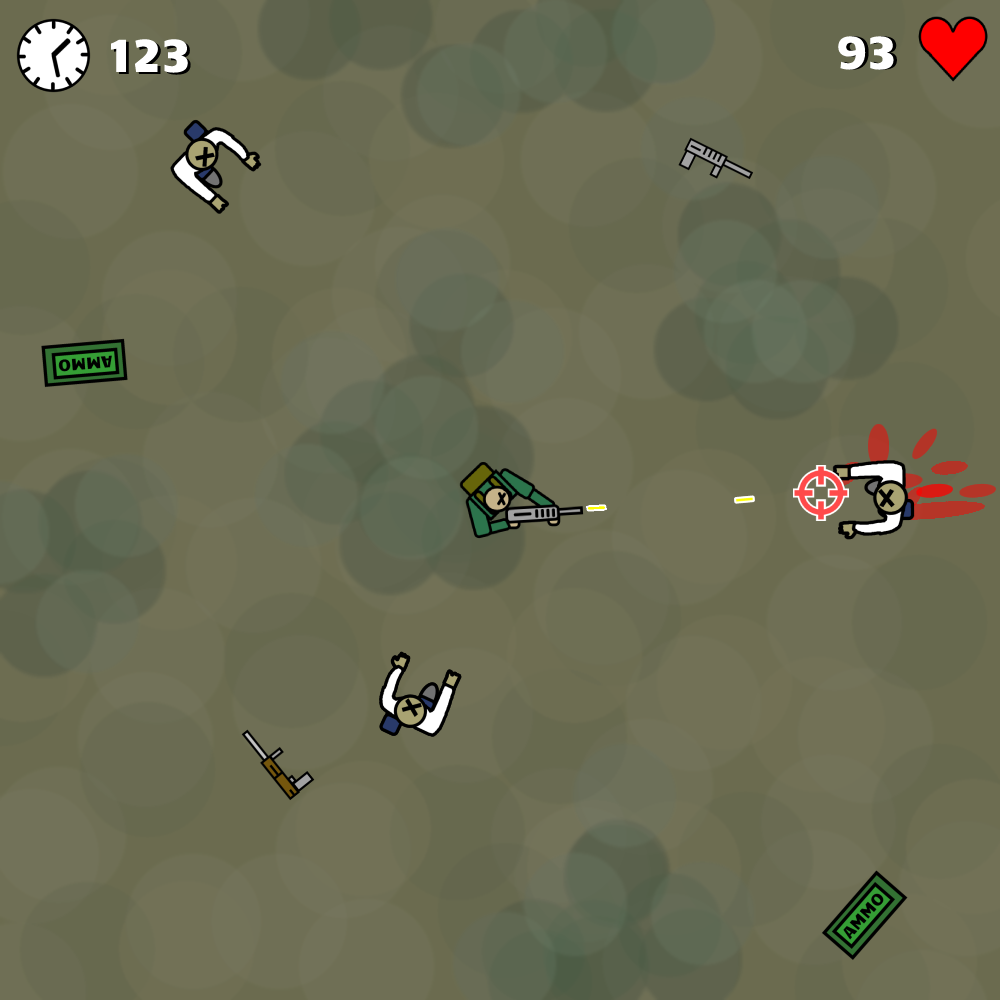
<style>
.page{position:relative;width:1000px;height:1000px}
.page>*{position:absolute;margin:0}
.t1{font:46.6px "Candal";color:#ffffff}
.t2{font:46.5px "Candal";color:#ffffff}
</style>
<div class="page">
<p class="t1" style="left:111px;top:39px;width:77px;height:34px">123</p>
<p class="t2" style="left:838px;top:36px;width:56px;height:34px">93</p>
</div>
